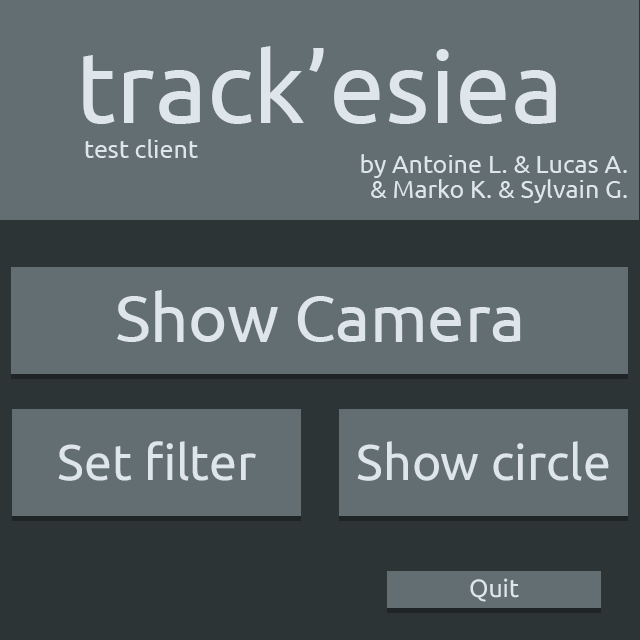
<style>
.page{position:relative;width:640px;height:640px;background:#636e72}
.page>*{position:absolute;margin:0}
.t1{font:25px/50px "Ubuntu";color:#dfe6e9}
.t2{font:100px "Ubuntu";color:#dfe6e9}
.t3{font:25px/25px "Ubuntu";color:#dfe6e9}
.t4{font:25px "Ubuntu";color:#dfe6e9}
.t5{font:66.7px "Ubuntu";color:#dfe6e9}
.t6{font:50px "Ubuntu";color:#dfe6e9}
</style>
<div class="page">
<p class="t1" style="left:83px;top:46px;width:544px;height:157px;text-align:center"><span class="t2">track’esiea<br></span>by Antoine L. &amp; Lucas A.<br><span class="t3">&amp; Marko K. &amp; Sylvain G.</span></p>
<p class="t4" style="left:85px;top:139px;width:113px;height:19px">test client</p>
<p class="t5" style="left:117px;top:290px;width:404px;height:52px">Show Camera</p>
<p class="t6" style="left:58px;top:441px;width:198px;height:40px">Set filter</p>
<p class="t6" style="left:357px;top:441px;width:252px;height:40px">Show circle</p>
<p class="t4" style="left:470px;top:578px;width:49px;height:24px">Quit</p>
</div>
